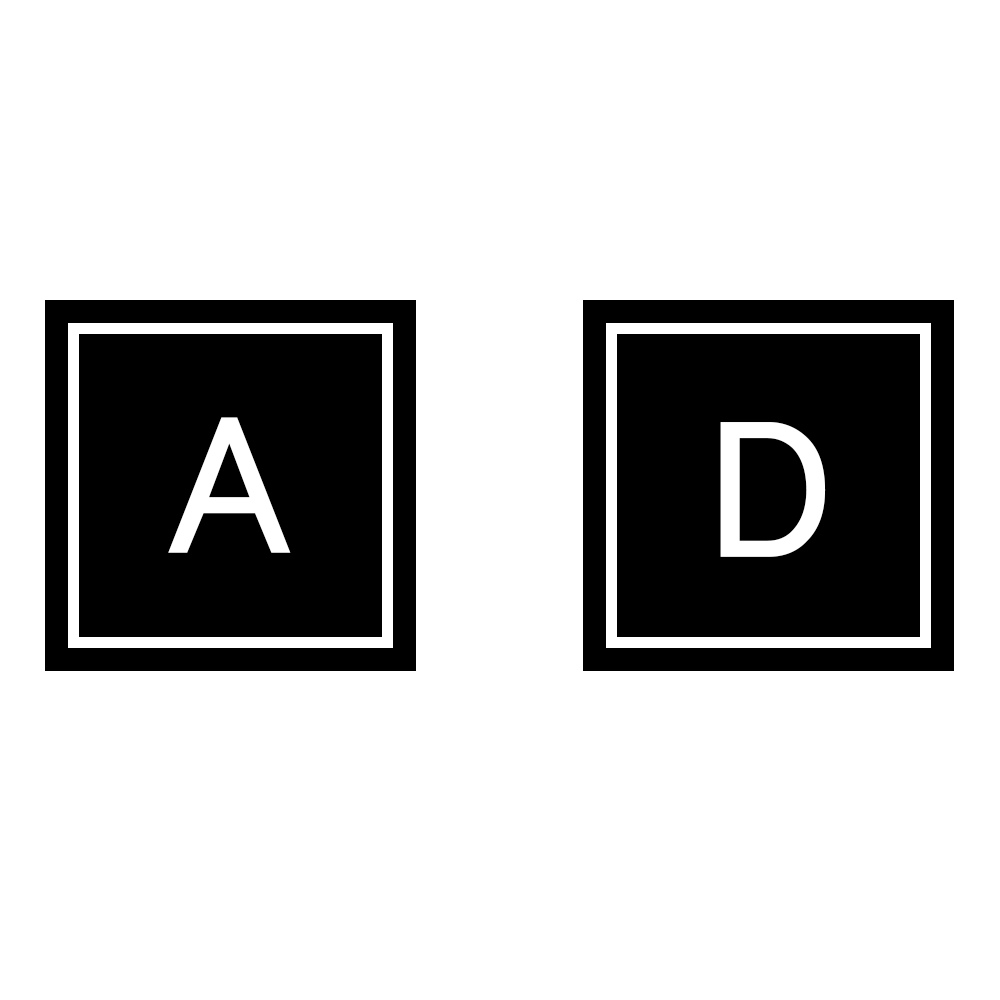
<style>
.page{position:relative;width:1000px;height:1000px;background:#ffffff}
.page>*{position:absolute;margin:0}
.t1{font:200px "MS-PGothic";letter-spacing:0.06em;color:#ffffff}
</style>
<div class="page">
<p class="t1" style="left:168px;top:417px;width:123px;height:136px">A</p>
<p class="t1" style="left:720px;top:422px;width:106px;height:135px">D</p>
</div>
